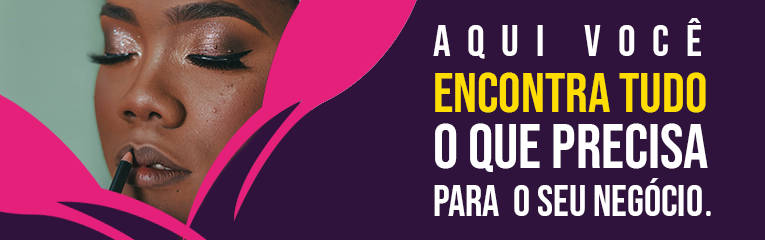
<style>
.page{position:relative;width:765px;height:240px;background:#2f133c}
.page>*{position:absolute;margin:0}
.t1{font:43px/48px "BebasNeue-Regular";color:#ffffff}
.t2{font:44px/48px "BebasNeue-Regular";letter-spacing:0.38em;color:#ffffff}
.t3{font:56px/56px "BebasNeue-Regular";color:#ffdd00}
.t4{font:63px/56px "BebasNeue-Regular";color:#ffffff}
.t5{font:43px/48px "Calibri";color:#ffffff}
</style>
<div class="page">
<p class="t1" style="left:433px;top:18px;width:278px;height:198px"><span class="t2">Aqui você<br></span><span class="t3">encontra tudo<br></span><span class="t4">o que precisa<br></span>para  o seu negócio<span class="t5">.</span></p>
</div>
